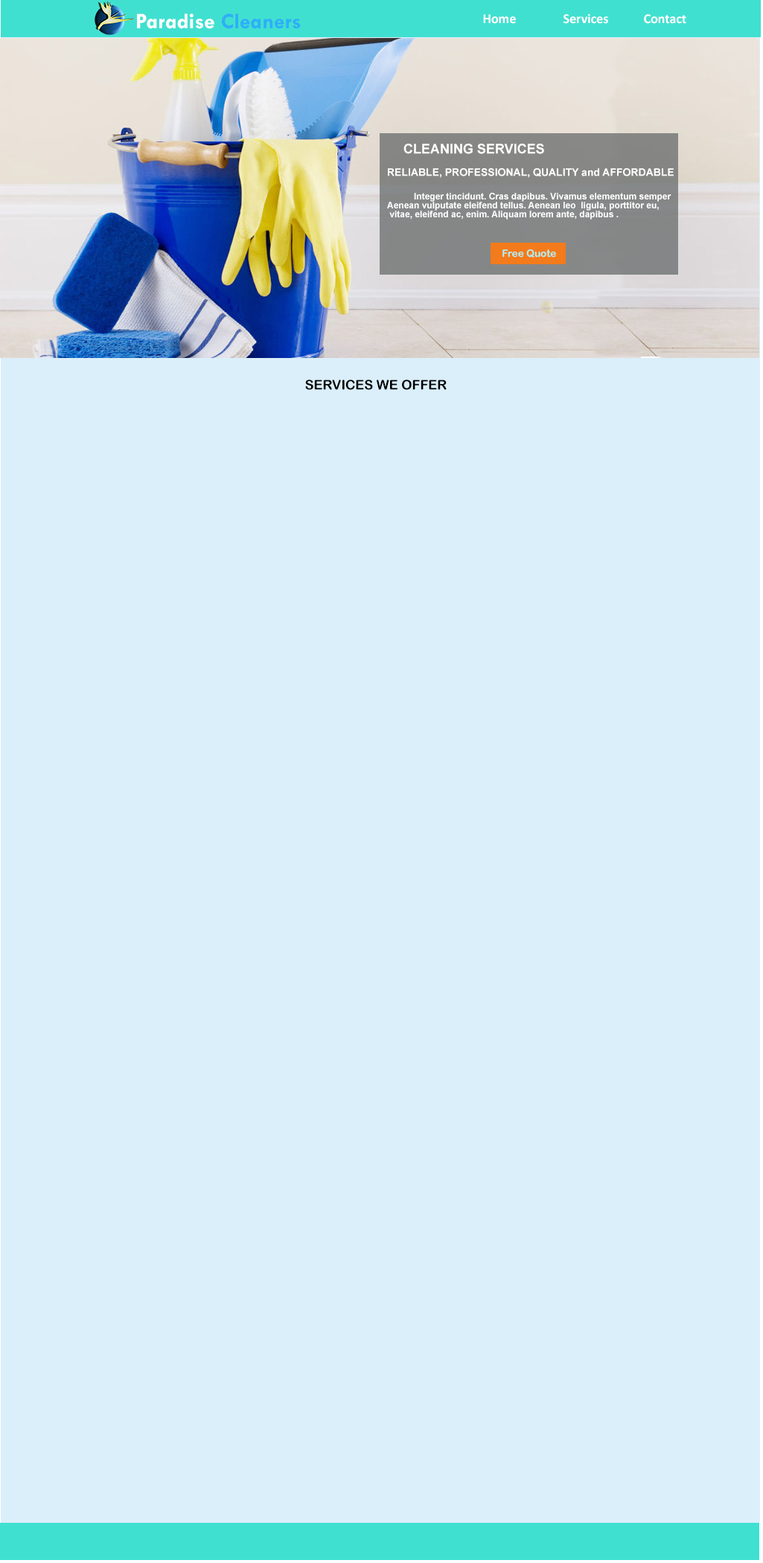
<style>
.page{position:relative;width:763px;height:1563px;background:#dbeffa}
.page>*{position:absolute;margin:0}
.t1{font:22.3px "TwCenMT-Bold";color:#ffffff}
.t2{font:22.3px "TwCenMT-Bold";color:#2eaef7}
.t3{font:13.4px "Calibri-Bold";color:#ffffff}
.t4{font:13.4px "Arial-BoldMT";color:#ffffff}
.t5{font:10.4px "Arial-BoldMT";color:#ffffff}
.t6{font:8.9px/8.9px "Arial-BoldMT";color:#ffffff}
.t7{font:10.4px "ArialRoundedMTBold";color:#afeeee}
.t8{font:13.4px "ArialRoundedMTBold";color:#000000}
</style>
<div class="page">
<p class="t1" style="left:137px;top:13px;width:164px;height:16px">Paradise <span class="t2">Cleaners</span></p>
<p class="t3" style="left:483px;top:14px;width:203px;height:10px">Home  Services  Contact</p>
<p class="t4" style="left:403px;top:144px;width:141px;height:10px">CLEANING SERVICES</p>
<p class="t5" style="left:388px;top:168px;width:286px;height:10px">RELIABLE, PROFESSIONAL, QUALITY and AFFORDABLE</p>
<p class="t6" style="left:387px;top:193px;width:284px;height:27px">Integer tincidunt. Cras dapibus. Vivamus elementum semper<br>Aenean vulputate eleifend tellus. Aenean leo  ligula, porttitor eu,<br> vitae, eleifend ac, enim. Aliquam lorem ante, dapibus .</p>
<p class="t7" style="left:502px;top:249px;width:54px;height:9px">Free Quote</p>
<p class="t8" style="left:305px;top:380px;width:142px;height:10px">SERVICES WE OFFER</p>
</div>
